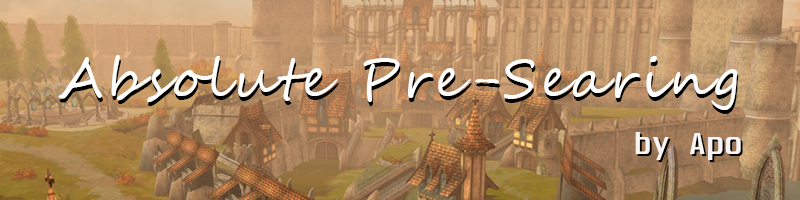
<style>
.page{position:relative;width:800px;height:200px}
.page>*{position:absolute;margin:0}
.t1{font:54px "SegoeScript";letter-spacing:0.06em;color:#ffffff}
.t2{font:54px "SegoeScript";letter-spacing:0.06em}
.t3{font:27px "Unispace-Bold";letter-spacing:0.06em;color:#f9f5f5}
</style>
<div class="page">
<p class="t1" style="left:58px;top:55px;width:680px;height:55px">Absolute Pre-Searing</p>
<p class="t2" style="left:59px;top:59px;width:680px;height:55px">Absolute Pre-Searing</p>
<p class="t3" style="left:635px;top:132px;width:106px;height:28px">by Apo</p>
</div>
